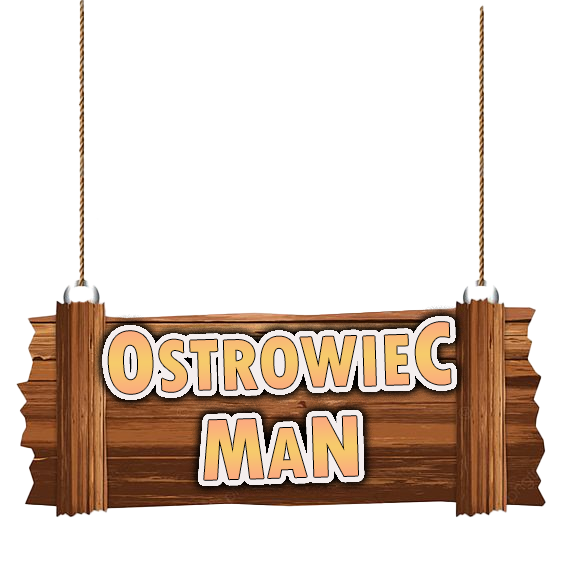
<style>
.page{position:relative;width:564px;height:564px;background:#ffffff}
.page>*{position:absolute;margin:0}
.t1{font:75.8px "TwCenMT-CondensedExtraBold";color:#f7bf72}
.t2{font:91px "TwCenMT-CondensedExtraBold";color:#f7bf72}
.t3{font:91px "TwCenMT-CondensedExtraBold";color:#f8bd74}
.t4{font:75.8px "TwCenMT-CondensedExtraBold";color:#f8bd74}
</style>
<div class="page">
<p class="t1" style="left:108px;top:322px;width:343px;height:72px;rotate:-2deg"><span class="t2">O</span>STROWIE<span class="t2">C</span></p>
<p class="t3" style="left:204px;top:416px;width:154px;height:64px;rotate:-2deg">M<span class="t4">A</span>N</p>
</div>
